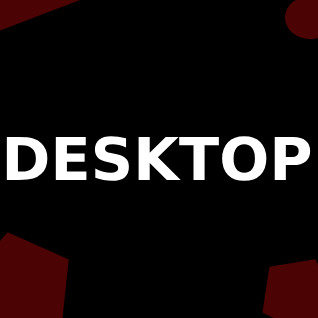
<style>
.page{position:relative;width:318px;height:318px;background:#000000}
.page>*{position:absolute;margin:0}
.t1{font:59px "DejaVuSans-Bold";color:#ffffff}
</style>
<div class="page">
<p class="t1" style="left:6px;top:136px;width:305px;height:45px">DESKTOP</p>
</div>
